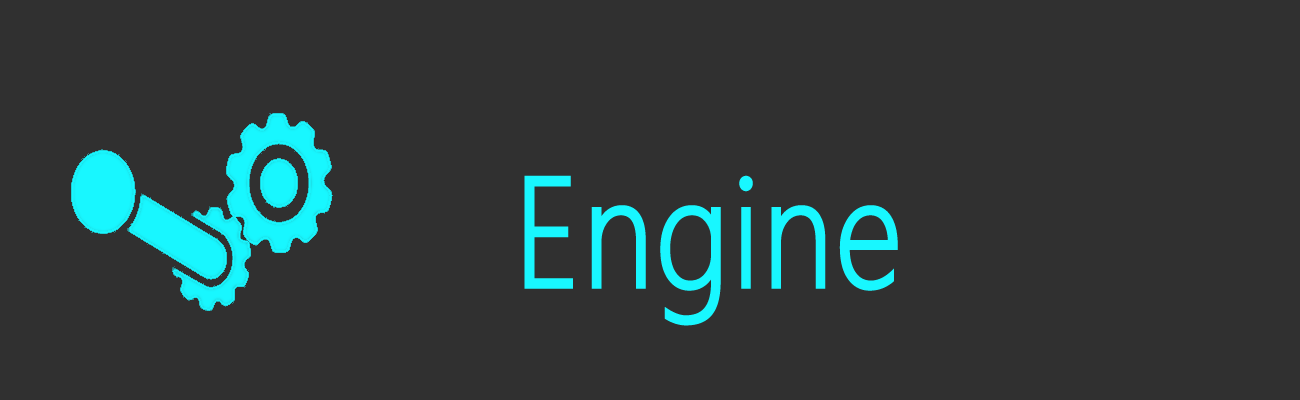
<style>
.page{position:relative;width:1300px;height:400px;background:#303030}
.page>*{position:absolute;margin:0}
.t1{font:156px "SegoeUI-Light";color:#18f7ff;font-weight:bold;scale:0.83 1}
</style>
<div class="page">
<p class="t1" style="left:524px;top:175px;width:374px;height:151px">Engine</p>
</div>
